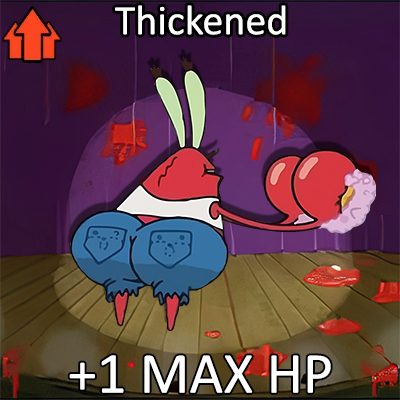
<style>
.page{position:relative;width:400px;height:400px}
.page>*{position:absolute;margin:0}
.t1{font:72px "Calibri";color:#ffffff}
.t2{font:100px "Calibri";color:#ffffff}
</style>
<div class="page">
<p class="t1" style="left:115px;top:5px;width:171px;height:30px">Thickened</p>
<p class="t2" style="left:69px;top:355px;width:262px;height:38px">+1 MAX HP</p>
</div>
